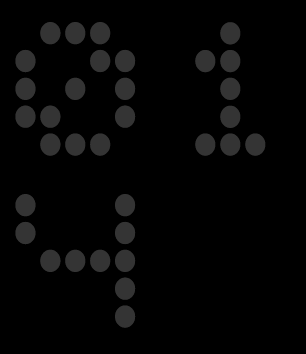
<style>
.page{position:relative;width:306px;height:354px;background:#000000}
.page>*{position:absolute;margin:0}
.t1{font:194.7px "5x5Dots";letter-spacing:0.005em;color:#343434;scale:0.89 1}
</style>
<div class="page">
<p class="t1" style="left:15px;top:22px;width:121px;height:134px">0</p>
<p class="t1" style="left:195px;top:22px;width:71px;height:134px">1</p>
<p class="t1" style="left:15px;top:194px;width:121px;height:134px">4</p>
</div>
